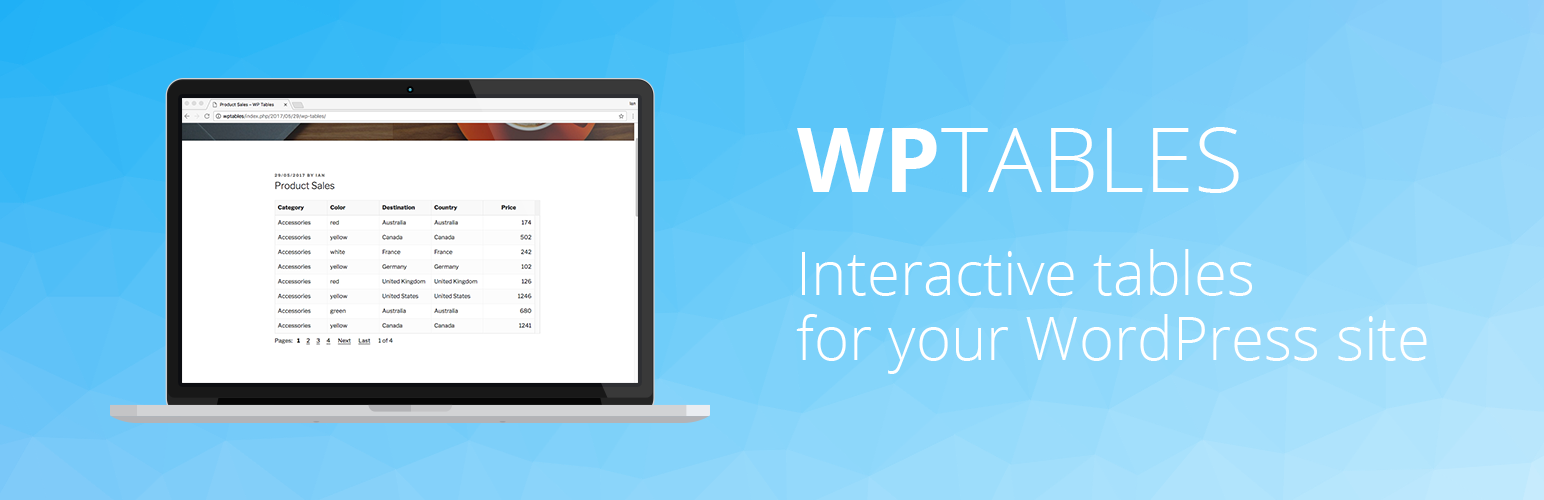
<style>
.page{position:relative;width:1544px;height:500px}
.page>*{position:absolute;margin:0}
.t1{font:90px "OpenSans-Light";color:#ffffff}
.t2{font:90px "OpenSans-Bold";color:#ffffff}
.t3{font:60px/65px "OpenSans-Light";color:#ffffff}
</style>
<div class="page">
<p class="t1" style="left:797px;top:127px;width:442px;height:66px"><span class="t2">WP</span>TABLES</p>
<p class="t3" style="left:796px;top:249px;width:631px;height:125px">Interactive tables<br>for your WordPress site</p>
</div>
